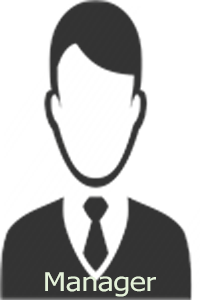
<style>
.page{position:relative;width:200px;height:300px;background:#ffffff}
.page>*{position:absolute;margin:0}
.t1{font:25.7px "Tahoma";color:#e4f1d9;scale:1.15 1}
</style>
<div class="page">
<p class="t1" style="left:45px;top:272px;width:111px;height:25px">Manager</p>
</div>
